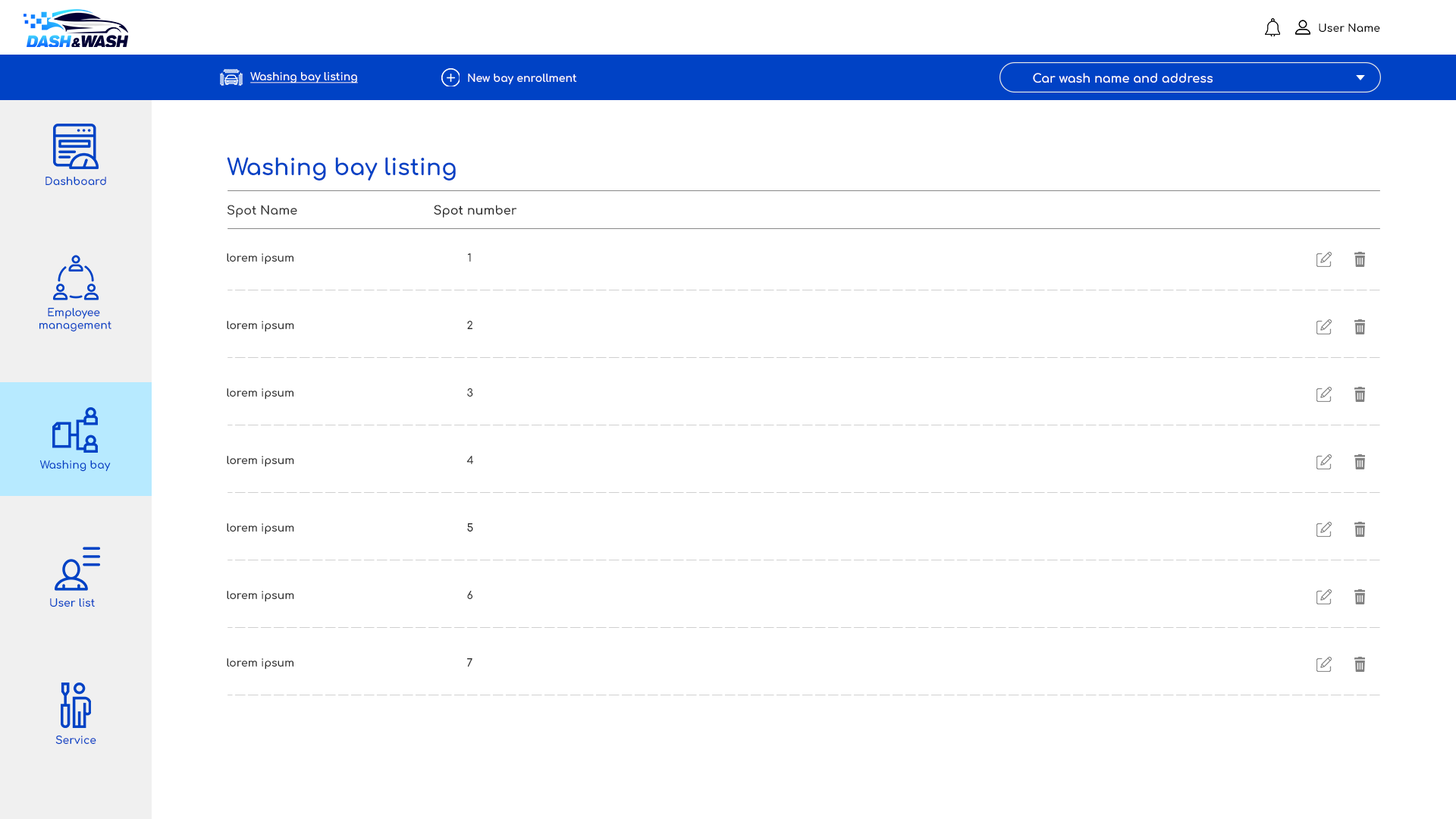
<style>
.page{position:relative;width:1456px;height:819px;background:#ffffff}
.page>*{position:absolute;margin:0}
.t1{font:10.6px "Comfortaa-Bold";color:#010101}
.t2{font:10.6px "Comfortaa-Bold";color:#ffffff;text-decoration:underline}
.t3{font:10.6px "Comfortaa-Bold";color:#ffffff}
.t4{font:12.1px "Comfortaa-Bold";color:#ffffff}
.t5{font:22.7px "Comfortaa-Bold";color:#0042c5}
.t6{font:10.6px "Comfortaa-Bold";color:#0042c5}
.t7{font:12.1px "Comfortaa-Bold";color:#393939}
.t8{font:12.1px "Comfortaa-Bold";color:#303030}
.t9{font:10.6px "Comfortaa-Bold";color:#303030}
</style>
<div class="page">
<p class="t1" style="left:1319px;top:24px;width:61px;height:9px">User Name</p>
<p class="t2" style="left:250px;top:72px;width:108px;height:11px">Washing bay listing</p>
<p class="t3" style="left:468px;top:74px;width:109px;height:11px">New bay enrollment</p>
<p class="t4" style="left:1033px;top:73px;width:180px;height:10px">Car wash name and address</p>
<p class="t5" style="left:227px;top:157px;width:229px;height:23px">Washing bay listing</p>
<p class="t6" style="left:45px;top:177px;width:61px;height:8px">Dashboard</p>
<p class="t7" style="left:227px;top:205px;width:70px;height:13px">Spot Name</p>
<p class="t8" style="left:434px;top:205px;width:83px;height:13px">Spot number</p>
<p class="t9" style="left:227px;top:253px;width:66px;height:12px">lorem ipsum</p>
<p class="t9" style="left:468px;top:253px;width:3px;height:9px">1</p>
<p class="t6" style="left:39px;top:308px;width:72px;height:23px;text-align:center">Employee <br>management</p>
<p class="t9" style="left:227px;top:321px;width:67px;height:11px">lorem ipsum</p>
<p class="t9" style="left:467px;top:321px;width:5px;height:8px">2</p>
<p class="t9" style="left:227px;top:388px;width:66px;height:12px">lorem ipsum</p>
<p class="t9" style="left:467px;top:388px;width:6px;height:9px">3</p>
<p class="t6" style="left:39px;top:460px;width:72px;height:12px">Washing bay</p>
<p class="t9" style="left:227px;top:456px;width:67px;height:11px">lorem ipsum</p>
<p class="t9" style="left:466px;top:456px;width:7px;height:8px">4</p>
<p class="t9" style="left:227px;top:523px;width:67px;height:12px">lorem ipsum</p>
<p class="t9" style="left:467px;top:523px;width:6px;height:9px">5</p>
<p class="t9" style="left:227px;top:591px;width:67px;height:11px">lorem ipsum</p>
<p class="t9" style="left:467px;top:591px;width:5px;height:8px">6</p>
<p class="t6" style="left:50px;top:598px;width:45px;height:9px">User list</p>
<p class="t9" style="left:227px;top:658px;width:66px;height:12px">lorem ipsum</p>
<p class="t9" style="left:467px;top:658px;width:5px;height:9px">7</p>
<p class="t6" style="left:55px;top:735px;width:41px;height:10px">Service</p>
</div>
